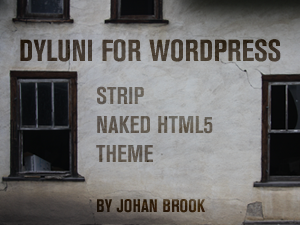
<style>
.page{position:relative;width:300px;height:225px}
.page>*{position:absolute;margin:0}
.t1{font:30px "AkzidenzGroteskBE-BoldCn";color:#40362d;text-transform:uppercase}
.t2{font:24px "AkzidenzGroteskBE-BoldCn";color:#5e574e;text-transform:uppercase}
.t3{font:18px "AkzidenzGroteskBE-BoldCn";color:#5e574e;text-transform:uppercase}
</style>
<div class="page">
<p class="t1" style="left:20px;top:39px;width:261px;height:23px">Dyluni for wordpress</p>
<p class="t1" style="left:20px;top:39px;width:261px;height:23px">Dyluni for wordpress</p>
<p class="t2" style="left:96px;top:86px;width:117px;height:127px">Strip<br>naked html5<br>theme<br><br><span class="t3">By Johan Brook</span></p>
<p class="t2" style="left:96px;top:86px;width:117px;height:127px">Strip<br>naked html5<br>theme<br><br><span class="t3">By Johan Brook</span></p>
</div>
